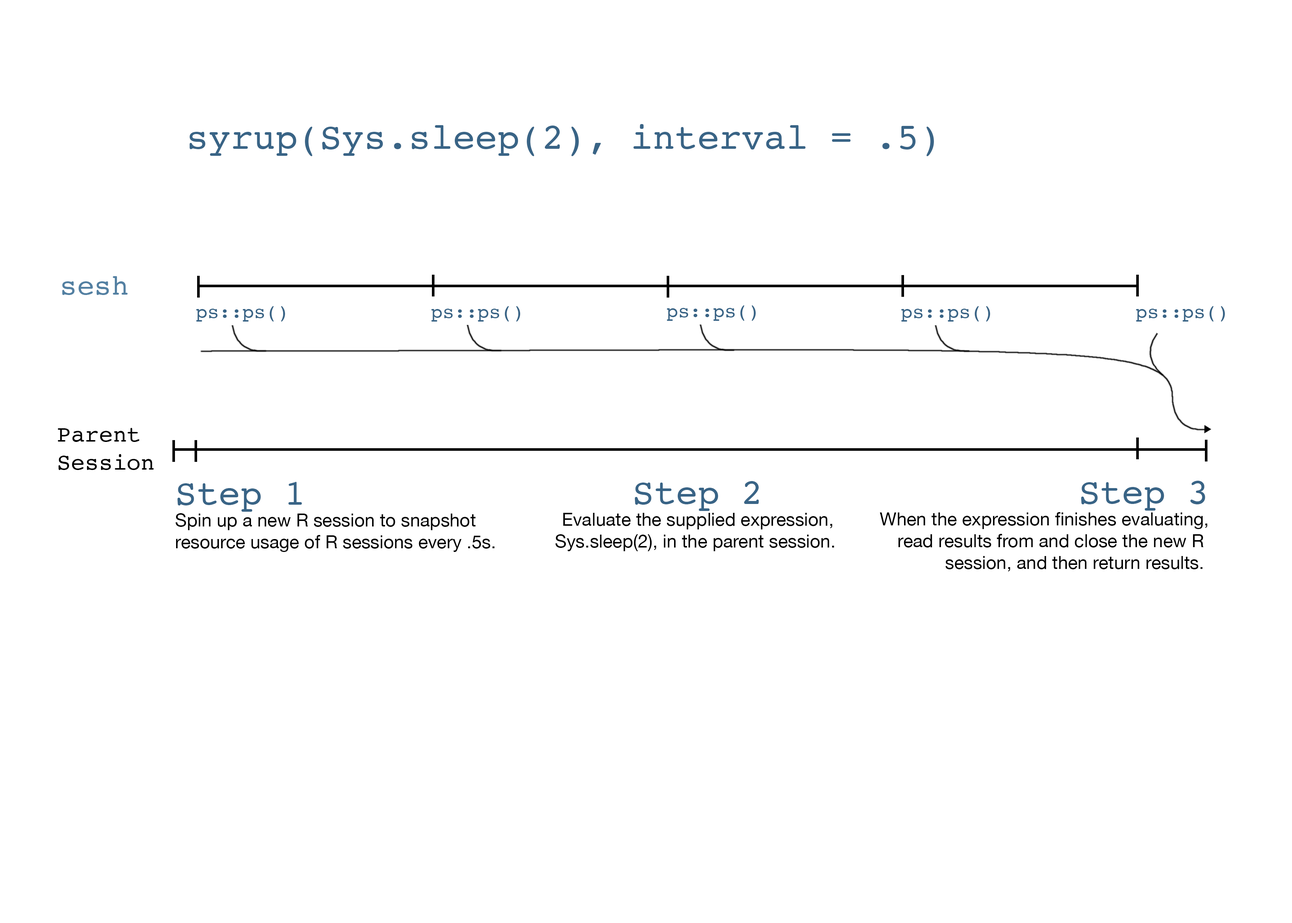
<style>
.page{position:relative;width:1292px;height:923px;background:#ffffff}
.page>*{position:absolute;margin:0}
.t1{font:37px "Courier";color:#396486}
.t2{font:28.8px "Courier";color:#5380a2}
.t3{font:19.4px "Courier";color:#396486}
.t4{font:23.3px "Courier";color:#000000}
.t5{font:18.1px "HelveticaNeue";color:#000000}
.t6{font:36.2px "Courier";color:#396486}
</style>
<div class="page">
<p class="t1" style="left:189px;top:124px;width:745px;height:32px">syrup(Sys.sleep(2), interval = .5)</p>
<p class="t2" style="left:62px;top:276px;width:66px;height:19px">sesh</p>
<p class="t3" style="left:667px;top:305px;width:89px;height:16px">ps::ps()</p>
<p class="t3" style="left:196px;top:306px;width:89px;height:16px">ps::ps()</p>
<p class="t3" style="left:431px;top:306px;width:90px;height:16px">ps::ps()</p>
<p class="t3" style="left:901px;top:306px;width:89px;height:16px">ps::ps()</p>
<p class="t3" style="left:1136px;top:306px;width:89px;height:16px">ps::ps()</p>
<p class="t4" style="left:58px;top:428px;width:96px;height:42px">Parent <br>Session</p>
<p class="t5" style="left:175px;top:482px;width:320px;height:70px"><span class="t6">Step 1<br></span>Spin up a new R session to snapshot<br>resource usage of R sessions every .5s.</p>
<p class="t5" style="left:555px;top:481px;width:279px;height:70px;text-align:center"><span class="t6">Step 2<br></span>Evaluate the supplied expression,<br>Sys.sleep(2), in the parent session.</p>
<p class="t5" style="left:880px;top:481px;width:328px;height:90px;text-align:right"><span class="t6">Step 3<br></span>When the expression finishes evaluating,<br>read results from and close the new R <br>session, and then return results.</p>
</div>
